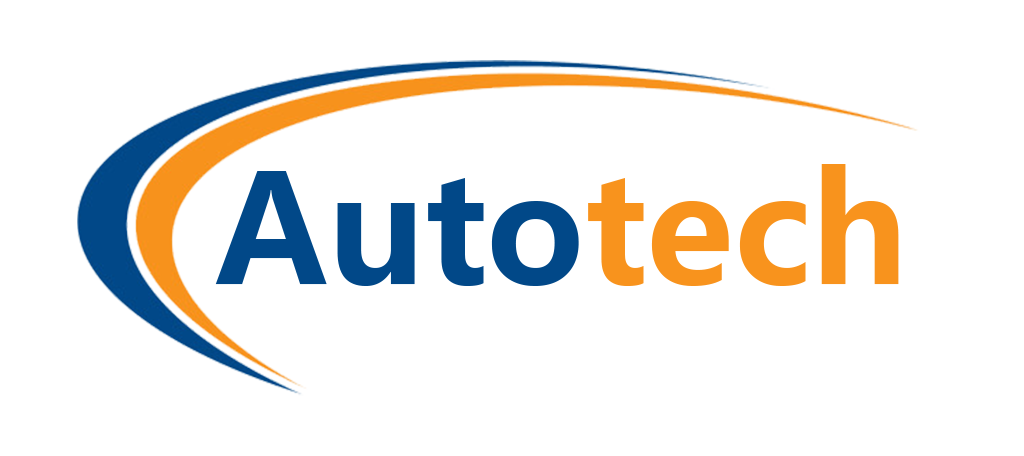
<style>
.page{position:relative;width:1024px;height:456px;background:#ffffff}
.page>*{position:absolute;margin:0}
.t1{font:150px "MicrosoftYaHeiUI-Bold";color:#014888}
.t2{font:150px "MicrosoftYaHeiUI-Bold";color:#f8931d}
</style>
<div class="page">
<p class="t1" style="left:215px;top:164px;width:684px;height:122px">Auto<span class="t2">tech</span></p>
</div>
